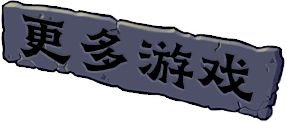
<style>
.page{position:relative;width:286px;height:122px;background:#ffffff}
.page>*{position:absolute;margin:0}
.t1{font:60.7px "GraveBustedStoneLishuSCRoughlyC";color:#000000;scale:1.12 1}
</style>
<div class="page">
<p class="t1" style="left:20px;top:14px;width:233px;height:88px;rotate:12deg">更多游戏</p>
</div>
